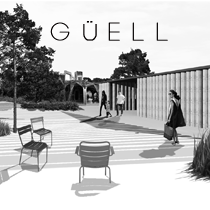
<style>
.page{position:relative;width:210px;height:210px}
.page>*{position:absolute;margin:0}
.t1{font:22.8px "SusannaRegular";letter-spacing:0.42em;color:#040000;font-weight:bold}
.t2{font:22.8px "Neou-Thin";letter-spacing:0.42em;color:#040000;font-weight:bold}
</style>
<div class="page">
<p class="t1" style="left:50px;top:21px;width:118px;height:20px">G<span class="t2">Ü</span>ELL</p>
</div>
